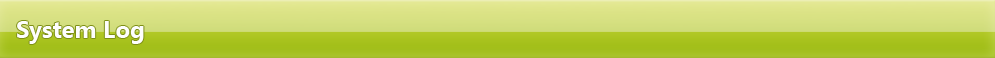
<style>
.page{position:relative;width:995px;height:58px}
.page>*{position:absolute;margin:0}
.t1{font:24px "SegoeUI-Bold";color:#fefefe}
</style>
<div class="page">
<p class="t1" style="left:17px;top:21px;width:127px;height:23px">System Log</p>
</div>
